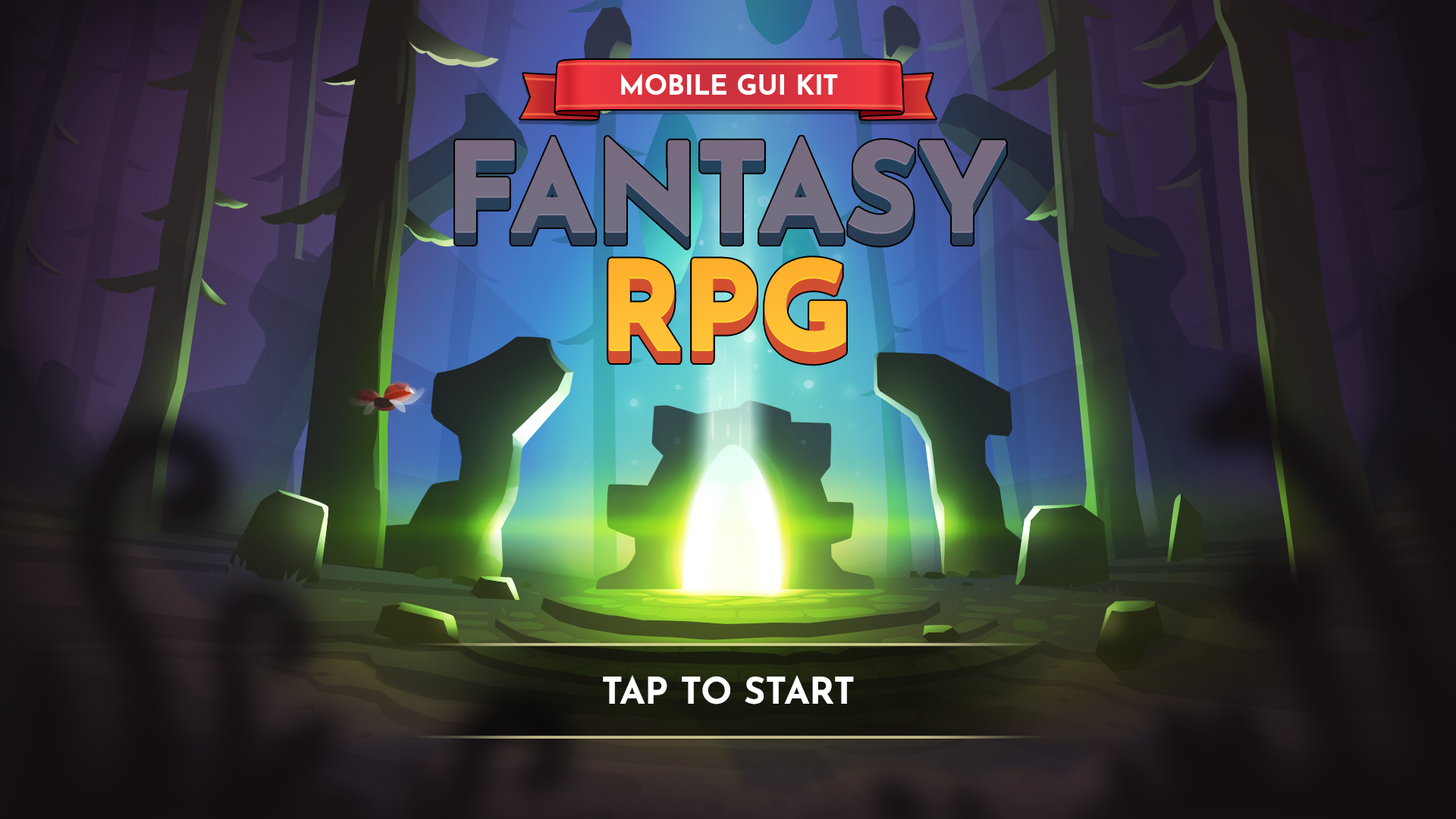
<style>
.page{position:relative;width:1456px;height:819px}
.page>*{position:absolute;margin:0}
.t1{font:27.3px "JosefinSans-Bold";color:#ffffff;text-transform:uppercase}
.t2{font:37px "JosefinSans-Bold";color:#ffffff;text-transform:uppercase}
</style>
<div class="page">
<p class="t1" style="left:621px;top:74px;width:217px;height:21px">mobile GUI kit</p>
<p class="t2" style="left:603px;top:675px;width:251px;height:29px">Tap to Start</p>
</div>
